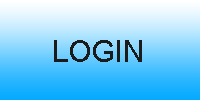
<style>
.page{position:relative;width:200px;height:100px}
.page>*{position:absolute;margin:0}
.t1{font:30px "DokChampa";color:#1b1b1b}
</style>
<div class="page">
<p class="t1" style="left:54px;top:40px;width:88px;height:22px">LOGIN</p>
</div>
